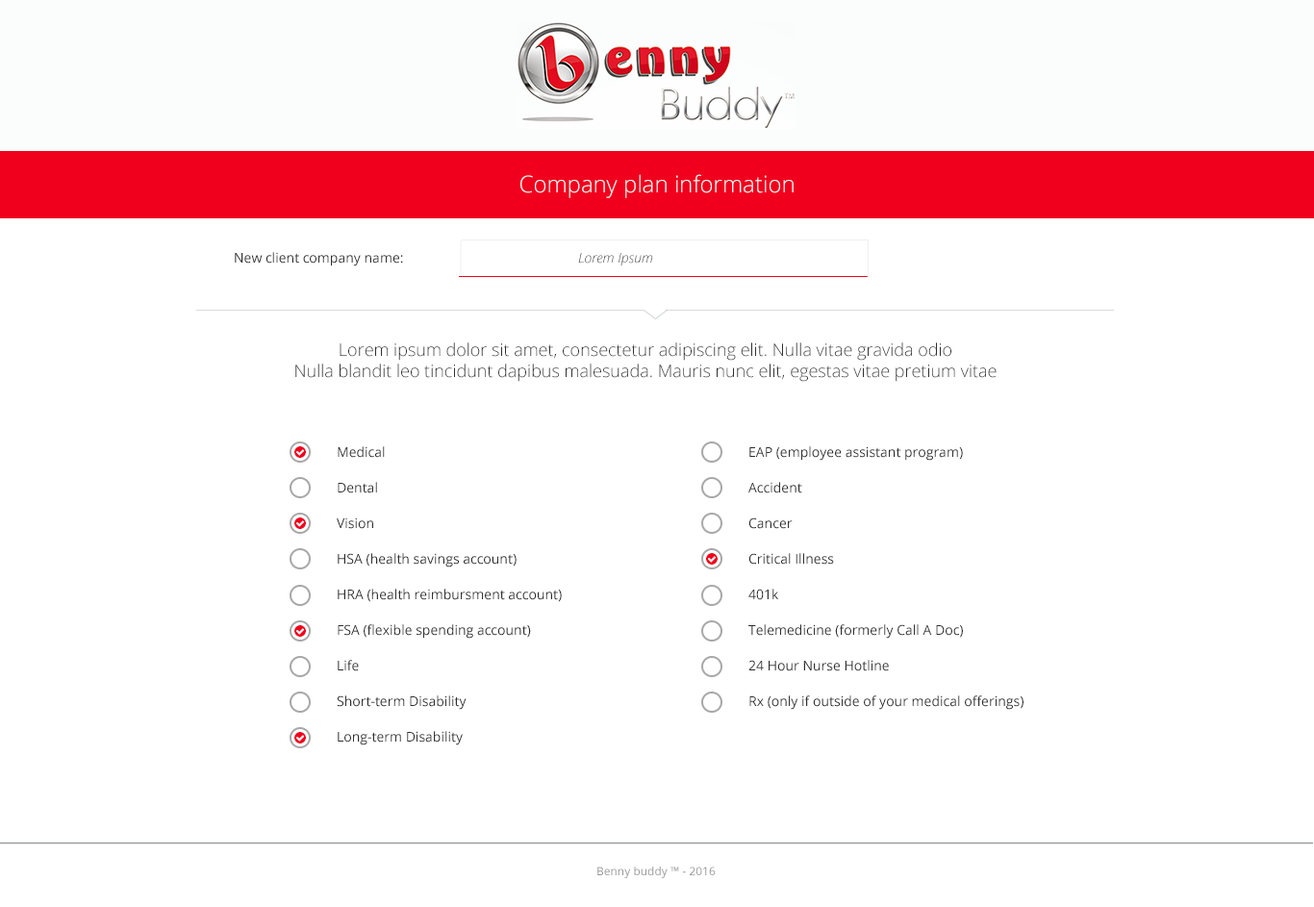
<style>
.page{position:relative;width:1314px;height:907px;background:#ffffff}
.page>*{position:absolute;margin:0}
.t1{font:23.1px "OpenSans-Light";color:#ffffff}
.t2{font:13.5px "OpenSans";color:#2e2e2e}
.t3{font:13.5px "OpenSansLight-Italic"}
.t4{font:17.3px "OpenSans-Light";color:#2e2e2e}
.t5{font:13.5px/35.6px "OpenSans";color:#2e2e2e}
.t6{font:11.5px "OpenSans";color:#979696}
</style>
<div class="page">
<p class="t1" style="left:521px;top:174px;width:273px;height:24px">Company plan information</p>
<p class="t2" style="left:235px;top:252px;width:168px;height:15px">New client company name:</p>
<p class="t3" style="left:578px;top:253px;width:75px;height:14px">Lorem Ipsum</p>
<p class="t4" style="left:295px;top:343px;width:702px;height:39px;text-align:center">Lorem ipsum dolor sit amet, consectetur adipiscing elit. Nulla vitae gravida odio<br>Nulla blandit leo tincidunt dapibus malesuada. Mauris nunc elit, egestas vitae pretium vitae</p>
<p class="t5" style="left:337px;top:446px;width:225px;height:300px">Medical<br>Dental<br>Vision<br>HSA (health savings account)<br>HRA (health reimbursment account)<br>FSA (flexible spending account)<br>Life<br>Short-term Disability<br>Long-term Disability</p>
<p class="t5" style="left:749px;top:446px;width:275px;height:264px">EAP (employee assistant program)<br>Accident<br>Cancer<br>Critical Illness<br>401k<br>Telemedicine (formerly Call A Doc)<br>24 Hour Nurse Hotline<br>Rx (only if outside of your medical offerings)</p>
<p class="t6" style="left:597px;top:867px;width:119px;height:11px">Benny buddy ™ - 2016</p>
</div>
